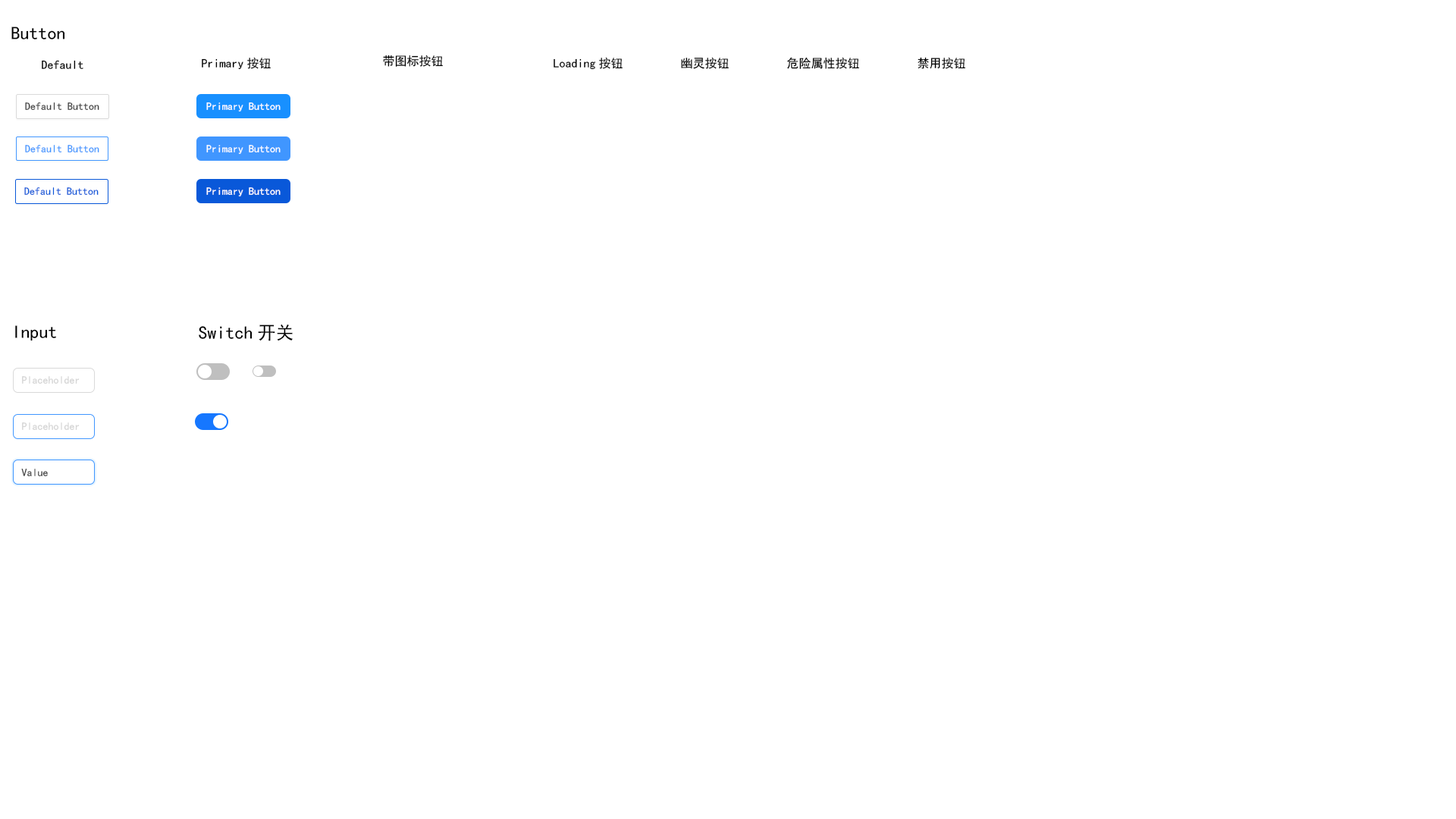
<style>
.page{position:relative;width:1456px;height:819px;background:#ffffff}
.page>*{position:absolute;margin:0}
.t1{font:18.2px "SimHei";color:#000000}
.t2{font:12.1px "SimHei";color:#000000}
.t3{font:10.6px "SimHei";color:#3d3d3d}
.t4{font:10.6px "SimHei";color:#ffffff}
.t5{font:10.6px "SimHei";color:#4096ff}
.t6{font:10.6px "SimHei";color:#0958d9}
.t7{font:10.6px "SimHei";color:#d4d4d4}
</style>
<div class="page">
<p class="t1" style="left:11px;top:27px;width:54px;height:12px">Button</p>
<p class="t2" style="left:42px;top:60px;width:41px;height:9px">Default</p>
<p class="t2" style="left:202px;top:57px;width:69px;height:13px">Primary按钮</p>
<p class="t2" style="left:383px;top:55px;width:60px;height:12px">带图标按钮</p>
<p class="t2" style="left:554px;top:57px;width:69px;height:13px">Loading按钮</p>
<p class="t2" style="left:681px;top:57px;width:48px;height:12px">幽灵按钮</p>
<p class="t2" style="left:787px;top:57px;width:72px;height:12px">危险属性按钮</p>
<p class="t2" style="left:918px;top:57px;width:47px;height:12px">禁用按钮</p>
<p class="t3" style="left:25px;top:102px;width:74px;height:8px">Default Button</p>
<p class="t4" style="left:206px;top:102px;width:75px;height:9px">Primary Button</p>
<p class="t5" style="left:25px;top:145px;width:74px;height:7px">Default Button</p>
<p class="t4" style="left:206px;top:145px;width:75px;height:9px">Primary Button</p>
<p class="t6" style="left:24px;top:187px;width:75px;height:8px">Default Button</p>
<p class="t4" style="left:206px;top:187px;width:75px;height:9px">Primary Button</p>
<p class="t1" style="left:15px;top:325px;width:41px;height:16px">Input</p>
<p class="t1" style="left:199px;top:324px;width:94px;height:17px">Switch开关</p>
<p class="t7" style="left:22px;top:376px;width:58px;height:8px">Placeholder</p>
<p class="t7" style="left:22px;top:422px;width:58px;height:8px">Placeholder</p>
<p class="t3" style="left:21px;top:469px;width:27px;height:7px">Value</p>
</div>
